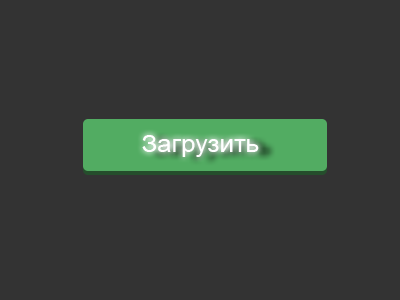
<style>
.page{position:relative;width:400px;height:300px;background:#333333}
.page>*{position:absolute;margin:0}
.t1{font:24.1px "ArialMT";color:#ffffff;scale:1.07 1}
</style>
<div class="page">
<p class="t1" style="left:142px;top:135px;width:117px;height:22px">Загрузить</p>
</div>
